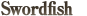
<style>
.page{position:relative;width:87px;height:16px;background:#ffffff}
.page>*{position:absolute;margin:0}
.t1{font:18px "RyuminPro-ExBold";letter-spacing:-0.06em;color:#4a3f32;font-weight:bold;scale:0.9 1}
</style>
<div class="page">
<p class="t1" style="left:1px;top:1px;width:72px;height:15px">Swordfish</p>
</div>
